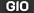
<style>
.page{position:relative;width:34px;height:13px}
.page>*{position:absolute;margin:0}
.t1{font:13.9px "K2D-ExtraBold";color:#ffffff}
</style>
<div class="page">
<p class="t1" style="left:6px;top:1px;width:23px;height:11px">GIO</p>
</div>
